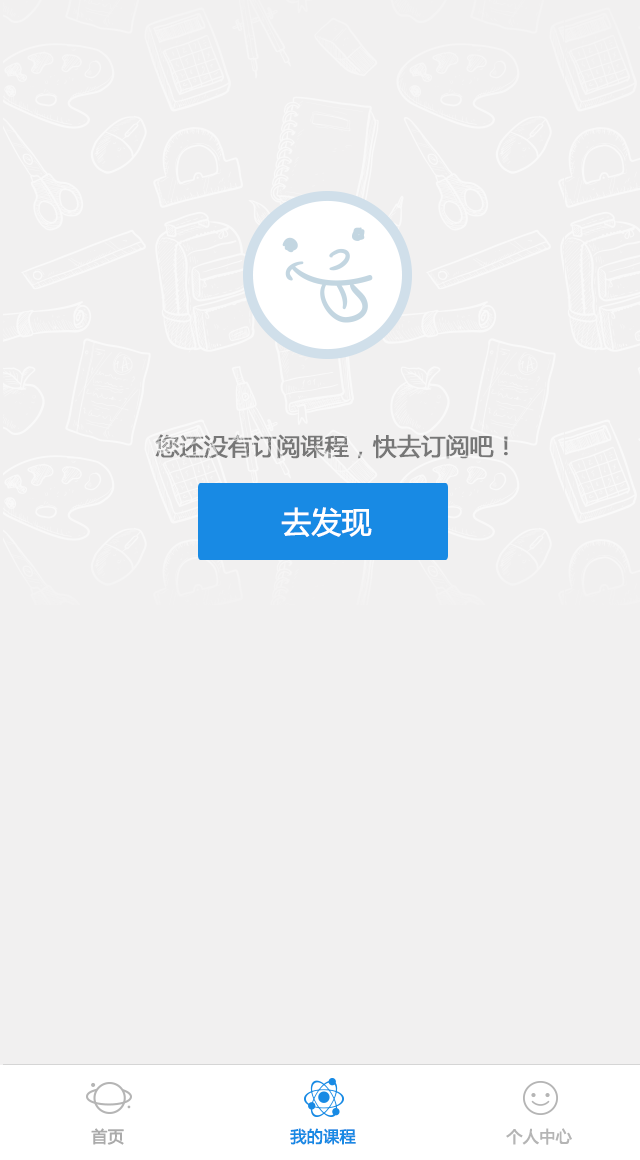
<style>
.page{position:relative;width:640px;height:1160px;background:#f1f0f0}
.page>*{position:absolute;margin:0}
.t1{font:24px "MicrosoftYaHei";letter-spacing:-0.02em;color:#777777;font-weight:bold}
.t2{font:30px "MicrosoftYaHei";letter-spacing:-0.02em;color:#ffffff;font-weight:bold}
.t3{font:16px "MicrosoftYaHei";color:#ababab;font-weight:bold}
.t4{font:16px "MicrosoftYaHei";color:#188ae4;font-weight:bold}
.t5{font:16px "MicrosoftYaHei";color:#b5b5b5;font-weight:bold}
</style>
<div class="page">
<p class="t1" style="left:155px;top:434px;width:353px;height:25px">您还没有订阅课程，快去订阅吧！</p>
<p class="t2" style="left:281px;top:507px;width:91px;height:30px">去发现</p>
<p class="t3" style="left:91px;top:1128px;width:33px;height:17px">首页</p>
<p class="t4" style="left:290px;top:1128px;width:66px;height:17px">我的课程</p>
<p class="t5" style="left:506px;top:1128px;width:66px;height:17px">个人中心</p>
</div>
